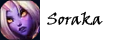
<style>
.page{position:relative;width:140px;height:40px;background:#ffffff}
.page>*{position:absolute;margin:0}
.t1{font:12px "VinerHandITC";color:#000000}
</style>
<div class="page">
<p class="t1" style="left:47px;top:11px;width:56px;height:15px">Soraka</p>
</div>
